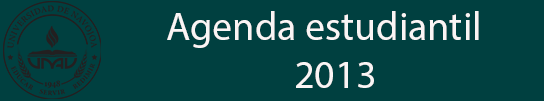
<style>
.page{position:relative;width:544px;height:101px;background:#004040}
.page>*{position:absolute;margin:0}
.t1{font:40px "MyriadPro-Regular";color:#faf5f5}
</style>
<div class="page">
<p class="t1" style="left:167px;top:11px;width:312px;height:77px">Agenda estudiantil<br>2013</p>
</div>
